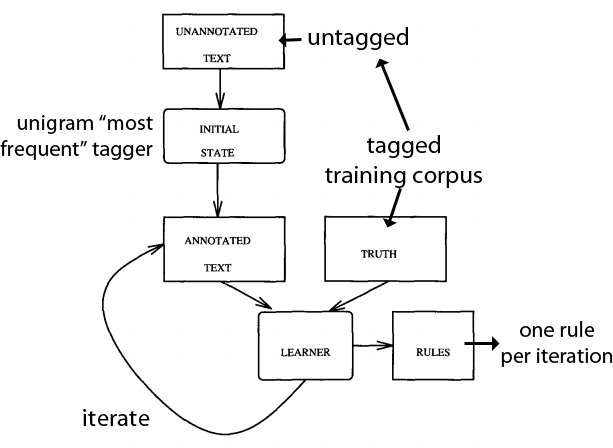
<style>
.page{position:relative;width:613px;height:448px;background:#ffffff}
.page>*{position:absolute;margin:0}
.t1{font:25px "MyriadPro-Regular";color:#000000}
.t2{font:22px "MyriadPro-Regular";color:#000000}
</style>
<div class="page">
<p class="t1" style="left:308px;top:27px;width:100px;height:23px">untagged</p>
<p class="t2" style="left:0px;top:114px;width:153px;height:46px;text-align:right">unigram “most<br>frequent” tagger</p>
<p class="t1" style="left:325px;top:135px;width:157px;height:53px;text-align:center">tagged<br>training corpus</p>
<p class="t2" style="left:501px;top:321px;width:112px;height:46px;text-align:center">one rule<br>per iteration</p>
<p class="t1" style="left:83px;top:409px;width:67px;height:17px">iterate</p>
</div>
